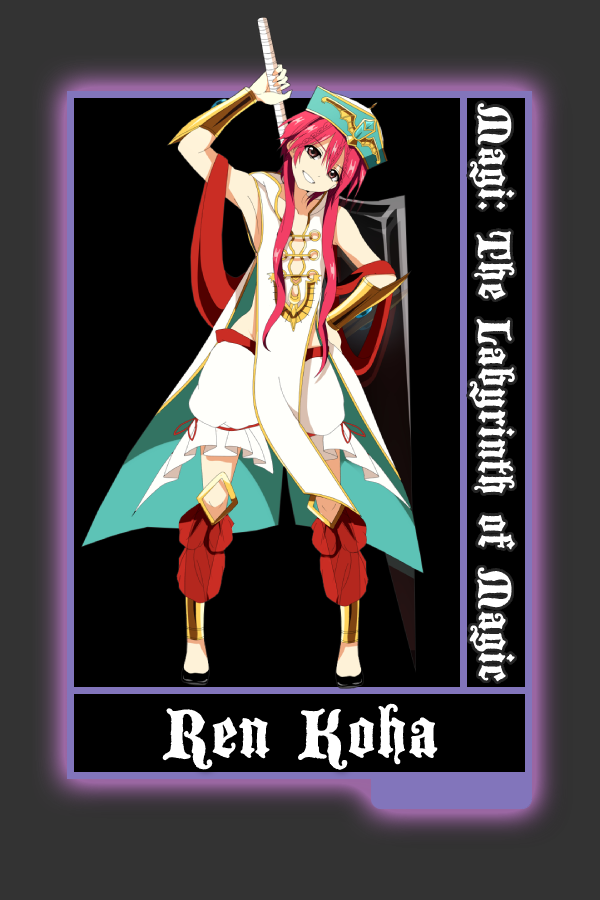
<style>
.page{position:relative;width:600px;height:900px;background:#000000}
.page>*{position:absolute;margin:0}
.t1{font:50px "BlackwoodCastle";color:#ffffff}
.t2{font:75px "BlackwoodCastle";color:#ffffff}
</style>
<div class="page">
<p class="t1" style="left:469px;top:103px;width:46px;height:579px;rotate:90deg">Magi: The Labyrinth of Magic</p>
<p class="t2" style="left:162px;top:703px;width:276px;height:67px">Ren Koha</p>
</div>
